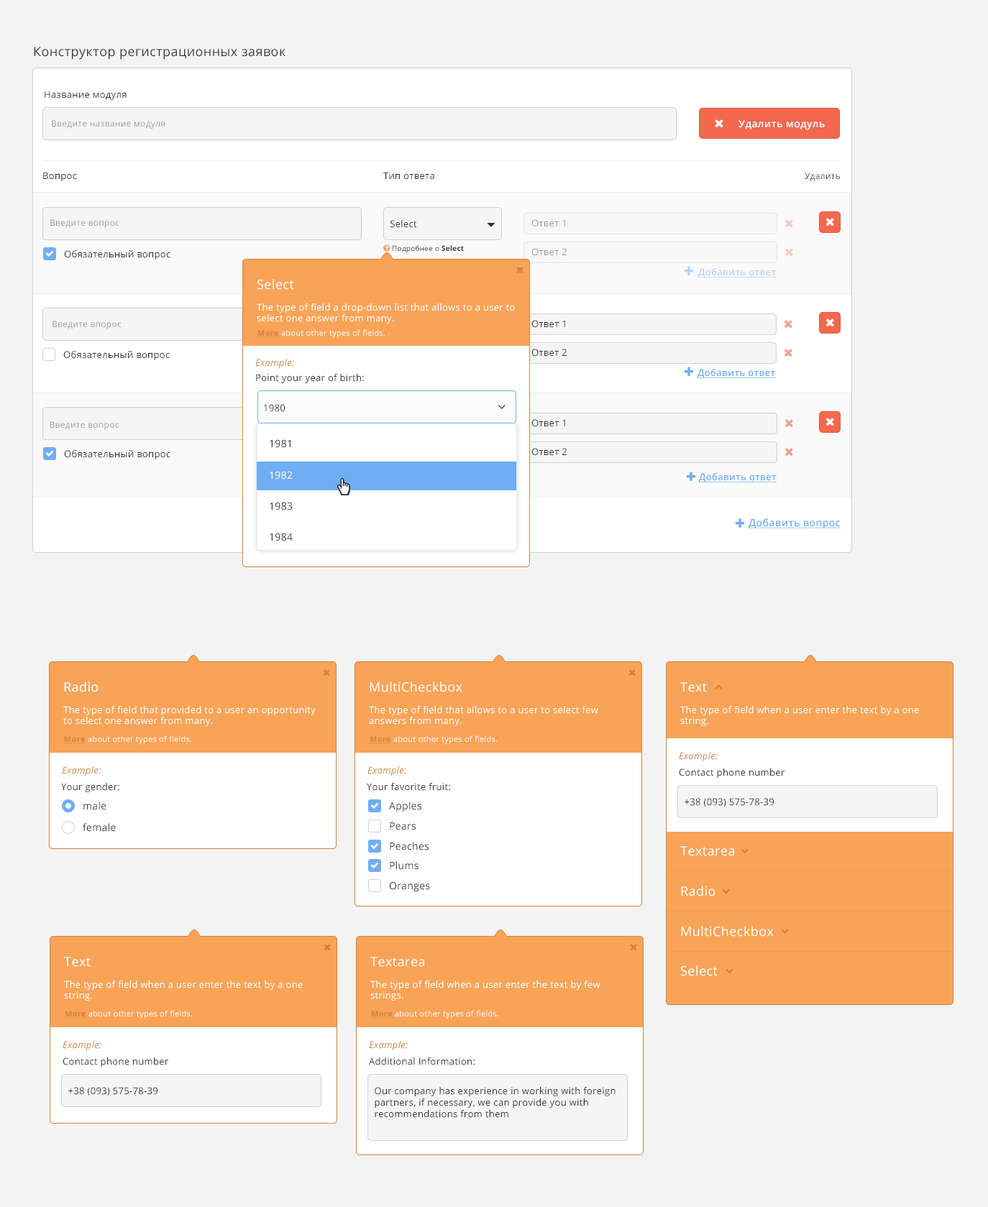
<style>
.page{position:relative;width:988px;height:1207px;background:#f3f3f3}
.page>*{position:absolute;margin:0}
.t1{font:12.9px "OpenSans";letter-spacing:0.025em;color:#373838}
.t2{font:9.3px "OpenSans";letter-spacing:0.025em;color:#333333}
.t3{font:8.6px "OpenSans";letter-spacing:0.025em;color:#999999}
.t4{font:10.1px "OpenSans-Semibold";letter-spacing:0.025em;color:#ffffff}
.t5{font:8.6px "OpenSans";letter-spacing:0.025em;color:#373838}
.t6{font:9.3px "OpenSans";letter-spacing:0.025em;color:#969696}
.t7{font:9.3px "OpenSans-Semibold";letter-spacing:0.025em;color:#b5d3f7;text-decoration:underline}
.t8{font:12.9px "OpenSans";letter-spacing:0.025em;color:#ffffff}
.t9{font:9.3px "OpenSans";letter-spacing:0.025em;color:#ffffff}
.t10{font:7.9px "OpenSans";letter-spacing:0.025em;color:#ffffff}
.t11{font:7.9px "OpenSans-Bold";letter-spacing:0.025em;color:#cf8340;text-decoration:underline}
.t12{font:9.3px "OpenSans-Italic";letter-spacing:0.025em;color:#cf8340}
.t13{font:9.3px "OpenSans-Semibold";letter-spacing:0.025em;color:#70adf5;text-decoration:underline}
.t14{font:10px "OpenSans";letter-spacing:0.025em;color:#333333}
.t15{font:10px "OpenSans";letter-spacing:0.025em;color:#ffffff}
.t16{font:10.1px "OpenSans-Semibold";letter-spacing:0.025em;color:#70adf5;text-decoration:underline}
.t17{font:9.3px "OpenSans";letter-spacing:0.025em;color:#373838}
</style>
<div class="page">
<p class="t1" style="left:34px;top:47px;width:251px;height:13px">Конструктор регистрационных заявок</p>
<p class="t2" style="left:45px;top:91px;width:82px;height:9px">Название модуля</p>
<p class="t3" style="left:52px;top:120px;width:113px;height:9px">Введите название модуля</p>
<p class="t4" style="left:738px;top:120px;width:87px;height:10px">Удалить модуль</p>
<p class="t2" style="left:43px;top:172px;width:34px;height:9px">Вопрос</p>
<p class="t2" style="left:383px;top:172px;width:51px;height:8px">Тип ответа</p>
<p class="t5" style="left:805px;top:173px;width:35px;height:8px">Удалить</p>
<p class="t3" style="left:50px;top:219px;width:69px;height:9px">Введите вопрос</p>
<p class="t2" style="left:390px;top:220px;width:27px;height:8px">Select</p>
<p class="t6" style="left:531px;top:219px;width:34px;height:8px">Ответ 1</p>
<p class="t2" style="left:64px;top:250px;width:106px;height:10px">Обязательный вопрос</p>
<p class="t6" style="left:531px;top:248px;width:36px;height:8px">Ответ 2</p>
<p class="t7" style="left:698px;top:268px;width:78px;height:10px">Добавить ответ</p>
<p class="t8" style="left:257px;top:279px;width:37px;height:11px">Select</p>
<p class="t9" style="left:257px;top:303px;width:258px;height:21px">The type of field a drop-down list that allows to a user to select one answer from many.</p>
<p class="t3" style="left:52px;top:321px;width:70px;height:8px">Введите впорос</p>
<p class="t10" style="left:257px;top:329px;width:128px;height:9px"><span class="t11">More </span>about other types of fields.</p>
<p class="t2" style="left:531px;top:320px;width:34px;height:8px">Ответ 1</p>
<p class="t2" style="left:63px;top:351px;width:107px;height:9px">Обязательный вопрос</p>
<p class="t2" style="left:531px;top:349px;width:36px;height:8px">Ответ 2</p>
<p class="t12" style="left:255px;top:359px;width:39px;height:9px">Example:</p>
<p class="t2" style="left:256px;top:374px;width:108px;height:9px">Point your year of birth:</p>
<p class="t13" style="left:697px;top:369px;width:79px;height:9px">Добавить ответ</p>
<p class="t2" style="left:264px;top:404px;width:21px;height:8px">1980</p>
<p class="t3" style="left:50px;top:421px;width:69px;height:9px">Введите вопрос</p>
<p class="t2" style="left:531px;top:419px;width:34px;height:8px">Ответ 1</p>
<p class="t14" style="left:270px;top:439px;width:20px;height:9px">1981</p>
<p class="t2" style="left:531px;top:448px;width:36px;height:8px">Ответ 2</p>
<p class="t2" style="left:64px;top:450px;width:106px;height:9px">Обязательный вопрос</p>
<p class="t15" style="left:270px;top:471px;width:23px;height:9px">1982</p>
<p class="t13" style="left:699px;top:473px;width:77px;height:9px">Добавить ответ</p>
<p class="t14" style="left:270px;top:502px;width:23px;height:8px">1983</p>
<p class="t16" style="left:748px;top:518px;width:92px;height:11px">Добавить вопрос</p>
<p class="t14" style="left:270px;top:533px;width:23px;height:8px">1984</p>
<p class="t8" style="left:64px;top:682px;width:34px;height:10px">Radio</p>
<p class="t8" style="left:370px;top:682px;width:92px;height:10px">MultiCheckbox</p>
<p class="t8" style="left:680px;top:682px;width:27px;height:10px">Text</p>
<p class="t9" style="left:63px;top:706px;width:253px;height:20px">The type of field that provided to a user an opportunity to select one answer from many.</p>
<p class="t9" style="left:369px;top:706px;width:229px;height:20px">The type of field that allows to a user to select few answers from many.</p>
<p class="t9" style="left:680px;top:706px;width:239px;height:20px">The type of field when a user enter the text by a one string.</p>
<p class="t10" style="left:64px;top:735px;width:127px;height:9px"><span class="t11">More </span>about other types of fields.</p>
<p class="t10" style="left:370px;top:735px;width:127px;height:9px"><span class="t11">More </span>about other types of fields.</p>
<p class="t12" style="left:679px;top:752px;width:39px;height:9px">Example:</p>
<p class="t12" style="left:62px;top:766px;width:39px;height:10px">Example:</p>
<p class="t12" style="left:367px;top:766px;width:39px;height:10px">Example:</p>
<p class="t17" style="left:679px;top:769px;width:105px;height:9px">Contact phone number</p>
<p class="t2" style="left:61px;top:783px;width:58px;height:9px">Your gender:</p>
<p class="t2" style="left:367px;top:783px;width:83px;height:8px">Your favorite fruit:</p>
<p class="t14" style="left:83px;top:802px;width:23px;height:8px">male</p>
<p class="t14" style="left:389px;top:802px;width:32px;height:10px">Apples</p>
<p class="t2" style="left:684px;top:798px;width:90px;height:9px">+38 (093) 575-78-39</p>
<p class="t14" style="left:83px;top:823px;width:33px;height:9px">female</p>
<p class="t14" style="left:390px;top:822px;width:26px;height:8px">Pears</p>
<p class="t14" style="left:390px;top:842px;width:38px;height:9px">Peaches</p>
<p class="t8" style="left:680px;top:846px;width:54px;height:10px">Textarea</p>
<p class="t14" style="left:390px;top:861px;width:28px;height:9px">Plums</p>
<p class="t14" style="left:389px;top:881px;width:41px;height:11px">Oranges</p>
<p class="t8" style="left:681px;top:886px;width:34px;height:11px">Radio</p>
<p class="t8" style="left:681px;top:926px;width:93px;height:11px">MultiCheckbox</p>
<p class="t8" style="left:64px;top:957px;width:27px;height:10px">Text</p>
<p class="t8" style="left:370px;top:957px;width:54px;height:10px">Textarea</p>
<p class="t8" style="left:681px;top:966px;width:37px;height:10px">Select</p>
<p class="t9" style="left:64px;top:981px;width:239px;height:20px">The type of field when a user enter the text by a one string.</p>
<p class="t9" style="left:370px;top:981px;width:230px;height:20px">The type of field when a user enter the text by few strings.</p>
<p class="t10" style="left:65px;top:1010px;width:127px;height:9px"><span class="t11">More </span>about other types of fields.</p>
<p class="t10" style="left:371px;top:1010px;width:127px;height:9px"><span class="t11">More </span>about other types of fields.</p>
<p class="t12" style="left:63px;top:1041px;width:38px;height:9px">Example:</p>
<p class="t12" style="left:369px;top:1041px;width:39px;height:9px">Example:</p>
<p class="t17" style="left:63px;top:1058px;width:105px;height:9px">Contact phone number</p>
<p class="t17" style="left:369px;top:1058px;width:106px;height:7px">Additional Information:</p>
<p class="t2" style="left:68px;top:1087px;width:89px;height:9px">+38 (093) 575-78-39</p>
<p class="t2" style="left:375px;top:1087px;width:240px;height:31px">Our company has experience in working with foreign <br>partners, if necessary, we can provide you with <br>recommendations from them</p>
</div>
